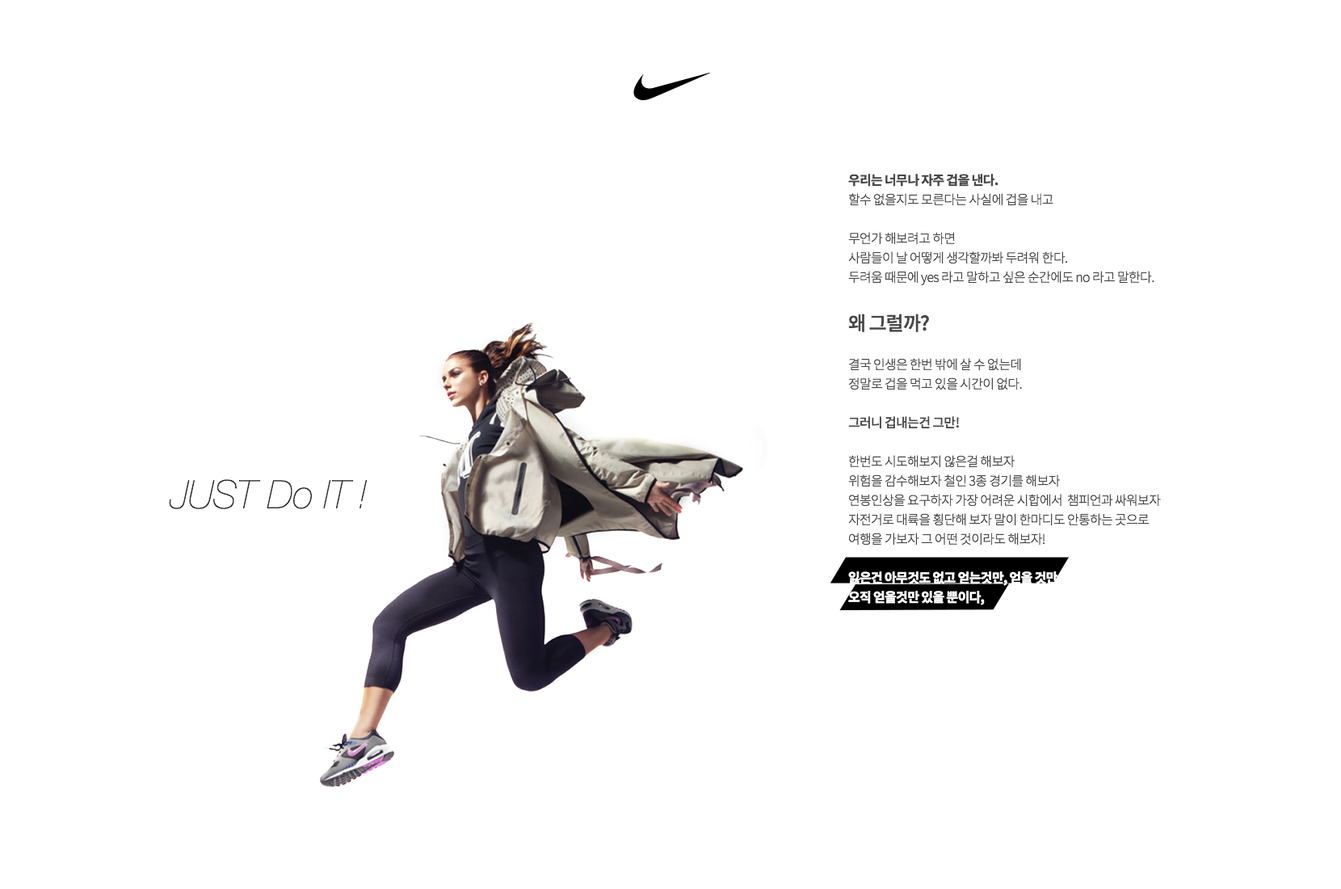
<style>
.page{position:relative;width:1341px;height:889px;background:#ffffff}
.page>*{position:absolute;margin:0}
.t1{font:12.9px "SourceHanSansKR-Light";letter-spacing:-0.04em;color:#484848}
.t2{font:12.9px "SourceHanSansKR-Bold";letter-spacing:-0.04em;color:#484848}
.t3{font:19.4px "SourceHanSansKR-Medium";letter-spacing:-0.04em;color:#484848}
.t4{font:12.9px "SourceHanSansKR-Medium";letter-spacing:-0.04em;color:#484848}
.t5{font:12.9px "SourceHanSansKR-Bold";letter-spacing:-0.04em;color:#ffffff}
.t6{font:38.8px "HelveticaNeueLTStd-UltLtIt";color:#2f2f2f}
</style>
<div class="page">
<p class="t1" style="left:849px;top:174px;width:312px;height:431px"><span class="t2">우리는 너무나 자주 겁을 낸다.<br></span>할수 없을지도 모른다는 사실에 겁을 내고<br>무언가 해보려고 하면<br>사람들이 날 어떻게 생각할까봐 두려워 한다.<br>두려움 때문에 yes 라고 말하고 싶은 순간에도 no 라고 말한다.<br><span class="t3">왜 그럴까?<br></span>결국 인생은 한번 밖에 살 수 없는데<br>정말로 겁을 먹고 있을 시간이 없다.<br><span class="t4">그러니 겁내는건 그만!<br></span>한번도 시도해보지 않은걸 해보자<br>위험을 감수해보자 철인 3종 경기를 해보자<br>연봉인상을 요구하자 가장 어려운 시합에서  챔피언과 싸워보자 자전거로 대륙을 횡단해 보자 말이 한마디도 안통하는 곳으로 여행을 가보자 그 어떤 것이라도 해보자!<br><span class="t5">잃은건 아무것도 없고 얻는것만, 얻을 것만 <br>오직 얻을것만 있을 뿐이다,</span></p>
<p class="t6" style="left:169px;top:479px;width:199px;height:30px">JUST Do IT !</p>
</div>
